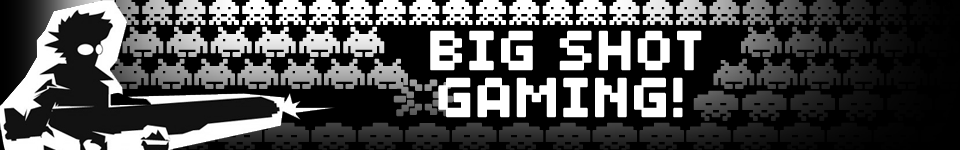
<style>
.page{position:relative;width:960px;height:150px;background:#000000}
.page>*{position:absolute;margin:0}
.t1{font:60px "04b03";color:#ffffff;font-weight:bold}
.t2{font:60px "invandersfromspace";font-weight:bold}
</style>
<div class="page">
<p class="t1" style="left:430px;top:30px;width:272px;height:41px">BIG SHOT</p>
<p class="t1" style="left:438px;top:77px;width:245px;height:41px">GAMING!</p>
<p class="t2" style="left:393px;top:79px;width:60px;height:38px">z</p>
</div>
